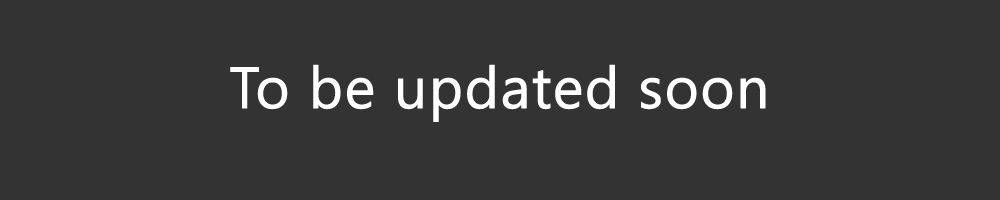
<style>
.page{position:relative;width:1000px;height:200px;background:#333333}
.page>*{position:absolute;margin:0}
.t1{font:58.3px "Gadugi";color:#ffffff;font-weight:bold}
</style>
<div class="page">
<p class="t1" style="left:230px;top:64px;width:536px;height:58px">To be updated soon</p>
</div>
